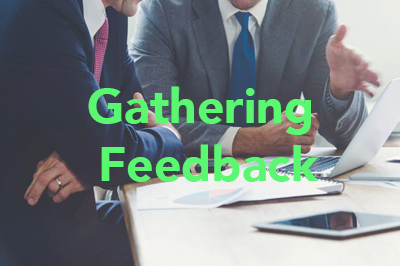
<style>
.page{position:relative;width:400px;height:266px}
.page>*{position:absolute;margin:0}
.t1{font:48px "Avenir-Black";color:#5af770}
</style>
<div class="page">
<p class="t1" style="left:88px;top:86px;width:230px;height:96px;text-align:center">Gathering <br>Feedback</p>
</div>
